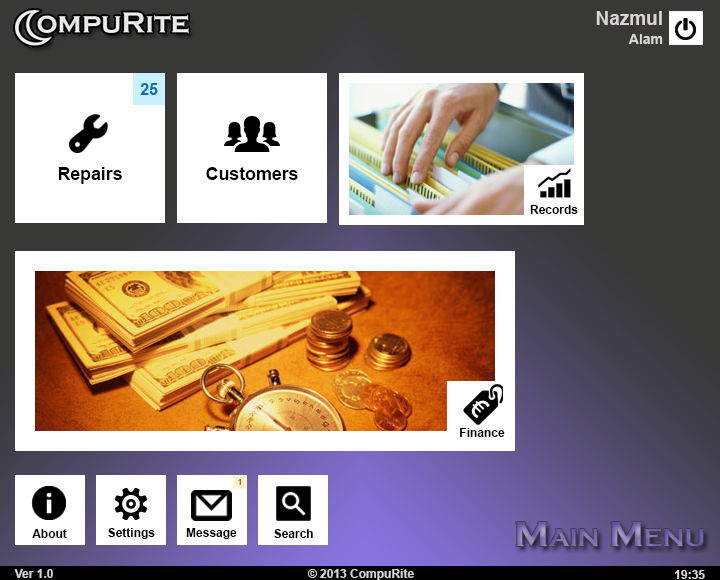
<style>
.page{position:relative;width:720px;height:580px;background:#ffffff}
.page>*{position:absolute;margin:0}
.t1{font:19px/18px "Arial-BoldMT";color:#d7d5d5}
.t2{font:14px/18px "Arial-BoldMT";color:#d7d5d5}
.t3{font:15.6px "Arial-BoldMT";color:#0171c0}
.t4{font:17.8px "Arial-BoldMT";color:#000000}
.t5{font:12px "Arial-BoldMT";color:#000000}
.t6{font:8px "Arial-BoldMT";color:#e8571e}
.t7{font:36px "CopperplateGothic-Bold";font-variant:small-caps}
.t8{font:12px "Arial-BoldMT";color:#d7d5d5}
</style>
<div class="page">
<p class="t1" style="left:596px;top:11px;width:67px;height:33px;text-align:right">Nazmul <br><span class="t2">Alam</span></p>
<p class="t3" style="left:140px;top:83px;width:18px;height:12px">25</p>
<p class="t4" style="left:58px;top:167px;width:64px;height:17px">Repairs</p>
<p class="t4" style="left:206px;top:167px;width:92px;height:13px">Customers</p>
<p class="t5" style="left:530px;top:205px;width:48px;height:9px">Records</p>
<p class="t5" style="left:460px;top:428px;width:45px;height:9px">Finance</p>
<p class="t6" style="left:238px;top:479px;width:3px;height:6px">1</p>
<p class="t5" style="left:32px;top:529px;width:35px;height:9px">About</p>
<p class="t5" style="left:108px;top:528px;width:47px;height:11px">Settings</p>
<p class="t5" style="left:186px;top:528px;width:51px;height:11px">Message</p>
<p class="t5" style="left:274px;top:529px;width:39px;height:9px">Search</p>
<p class="t7" style="left:516px;top:522px;width:188px;height:25px">Main Menu</p>
<p class="t8" style="left:14px;top:569px;width:39px;height:9px">Ver 1.0</p>
<p class="t8" style="left:307px;top:569px;width:107px;height:11px">© 2013 CompuRite</p>
<p class="t8" style="left:675px;top:570px;width:30px;height:9px">19:35</p>
</div>
